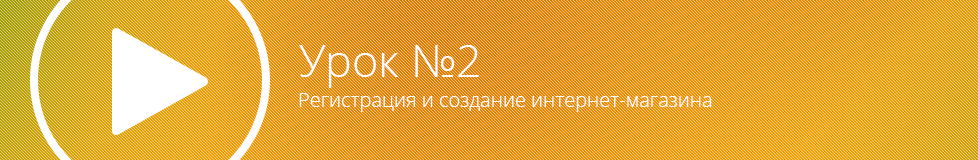
<style>
.page{position:relative;width:978px;height:160px}
.page>*{position:absolute;margin:0}
.t1{font:20px/30px "OpenSans-Light";color:#ffffff}
.t2{font:10px/30px "OpenSans-Light";color:#ffffff}
.t3{font:45px/30px "OpenSans-Light";color:#ffffff}
</style>
<div class="page">
<p class="t1" style="left:299px;top:45px;width:413px;height:67px"><span class="t2"> </span><span class="t3">Урок №2<br></span>Регистрация и создание интернет-магазина</p>
</div>
